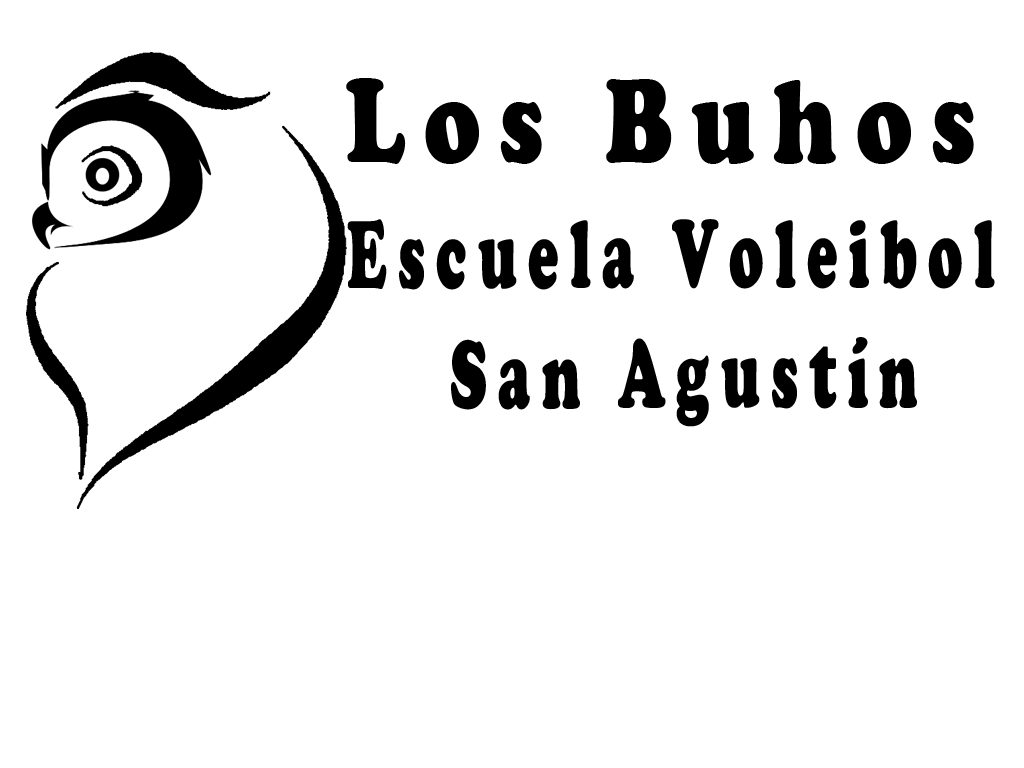
<style>
.page{position:relative;width:1024px;height:768px;background:#ffffff}
.page>*{position:absolute;margin:0}
.t1{font:123.4px "CooperBlack";letter-spacing:0.2em;color:#000000;scale:0.76 1}
.t2{font:100px "CooperBlack";letter-spacing:0.2em;color:#000000;scale:0.57 1}
</style>
<div class="page">
<p class="t1" style="left:346px;top:78px;width:628px;height:86px">Los Buhos</p>
<p class="t2" style="left:347px;top:219px;width:648px;height:208px;text-align:center">Escuela Voleibol<br> San Agustín</p>
</div>
